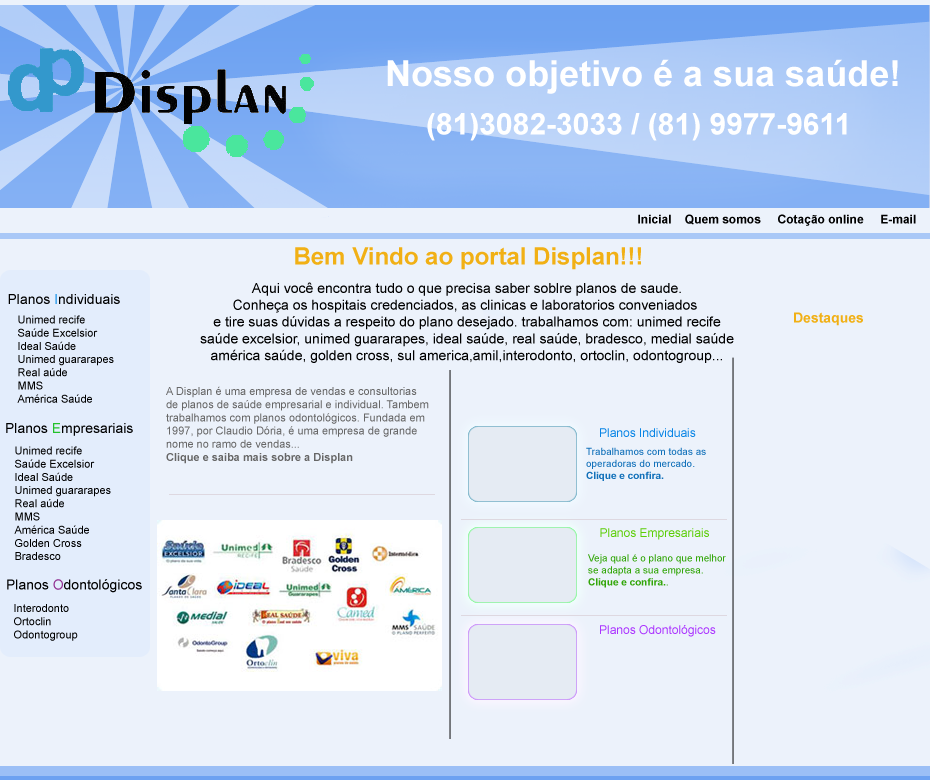
<style>
.page{position:relative;width:930px;height:780px;background:#ecf2fb}
.page>*{position:absolute;margin:0}
.t1{font:36px "Arial-BoldMT";color:#ffffff}
.t2{font:30px "Arial-BoldMT";color:#ffffff}
.t3{font:12px "Arial-BoldMT";color:#000000}
.t4{font:24px "Arial-BoldMT";color:#f1b015}
.t5{font:14px "ArialMT";color:#000000}
.t6{font:14px "ArialMT";color:#010101}
.t7{font:14px "ArialMT";color:#1892e8}
.t8{font:11px "ArialMT";color:#000000}
.t9{font:14px "Arial-BoldMT";color:#f1b015}
.t10{font:11px "ArialMT";color:#676767}
.t11{font:11px "Arial-BoldMT";color:#676767}
.t12{font:14px "ArialMT";color:#22c12a}
.t13{font:12px "ArialMT";color:#0784e5}
.t14{font:10px "ArialMT";color:#1472bb}
.t15{font:10px "Arial-BoldMT";color:#1472bb}
.t16{font:12px "ArialMT";color:#5bcf06}
.t17{font:10px "ArialMT";color:#33a60a}
.t18{font:10px "Arial-BoldMT";color:#33a60a}
.t19{font:14px "ArialMT";color:#902f91}
.t20{font:11px "ArialMT";color:#010101}
.t21{font:12px "ArialMT";color:#ab34ff}
</style>
<div class="page">
<p class="t1" style="left:387px;top:59px;width:511px;height:35px">Nosso objetivo é a sua saúde!</p>
<p class="t2" style="left:427px;top:113px;width:420px;height:28px">(81)3082-3033 / (81) 9977-9611</p>
<p class="t3" style="left:638px;top:214px;width:278px;height:12px">Inicial    Quem somos     Cotação online     E-mail</p>
<p class="t4" style="left:295px;top:247px;width:346px;height:23px">Bem Vindo ao portal Displan!!!</p>
<p class="t5" style="left:8px;top:294px;width:112px;height:10px"><span class="t6">Planos </span><span class="t7">I</span>ndividuais</p>
<p class="t5" style="left:200px;top:282px;width:534px;height:81px;text-align:center">Aqui você encontra tudo o que precisa saber soblre planos de saude.<br>Conheça os hospitais credenciados, as clinicas e laboratorios conveniados <br>e tire suas dúvidas a respeito do plano desejado. trabalhamos com: unimed recife<br>saúde excelsior, unimed guararapes, ideal saúde, real saúde, bradesco, medial saúde<br>américa saúde, golden cross, sul america,amil,interodonto, ortoclin, odontogroup...</p>
<p class="t8" style="left:17px;top:315px;width:97px;height:88px">Unimed recife<br>Saúde Excelsior<br>Ideal Saúde<br>Unimed guararapes<br>Real aúde<br>MMS<br>América Saúde</p>
<p class="t9" style="left:794px;top:312px;width:69px;height:14px">Destaques</p>
<p class="t10" style="left:166px;top:386px;width:263px;height:78px">A Displan é uma empresa de vendas e consultorias<br>de planos de saúde empresarial e individual. Tambem<br>trabalhamos com planos odontológicos. Fundada em<br>1997, por Claudio Dória, é uma empresa de grande<br>nome no ramo de vendas...<br><span class="t11">Clique e saiba mais sobre a Displan</span></p>
<p class="t5" style="left:6px;top:423px;width:127px;height:13px">Planos <span class="t12">E</span>mpresariais</p>
<p class="t13" style="left:600px;top:428px;width:96px;height:9px">Planos Individuais</p>
<p class="t8" style="left:14px;top:446px;width:97px;height:114px">Unimed recife<br>Saúde Excelsior<br>Ideal Saúde<br>Unimed guararapes<br>Real aúde<br>MMS<br>América Saúde<br>Golden Cross<br>Bradesco</p>
<p class="t14" style="left:586px;top:447px;width:120px;height:34px">Trabalhamos com todas as<br>operadoras do mercado.<br><span class="t15">Clique e confira.</span></p>
<p class="t16" style="left:600px;top:528px;width:109px;height:12px">Planos Empresariais</p>
<p class="t17" style="left:588px;top:554px;width:138px;height:34px">Veja qual é o plano que melhor<br>se adapta a sua empresa.<br><span class="t18">Clique e confira.</span>.</p>
<p class="t5" style="left:7px;top:579px;width:135px;height:14px">Planos <span class="t19">O</span>dontológicos</p>
<p class="t20" style="left:14px;top:604px;width:64px;height:37px">Interodonto<br>Ortoclin<br>Odontogroup</p>
<p class="t21" style="left:600px;top:625px;width:116px;height:12px">Planos Odontológicos</p>
</div>
